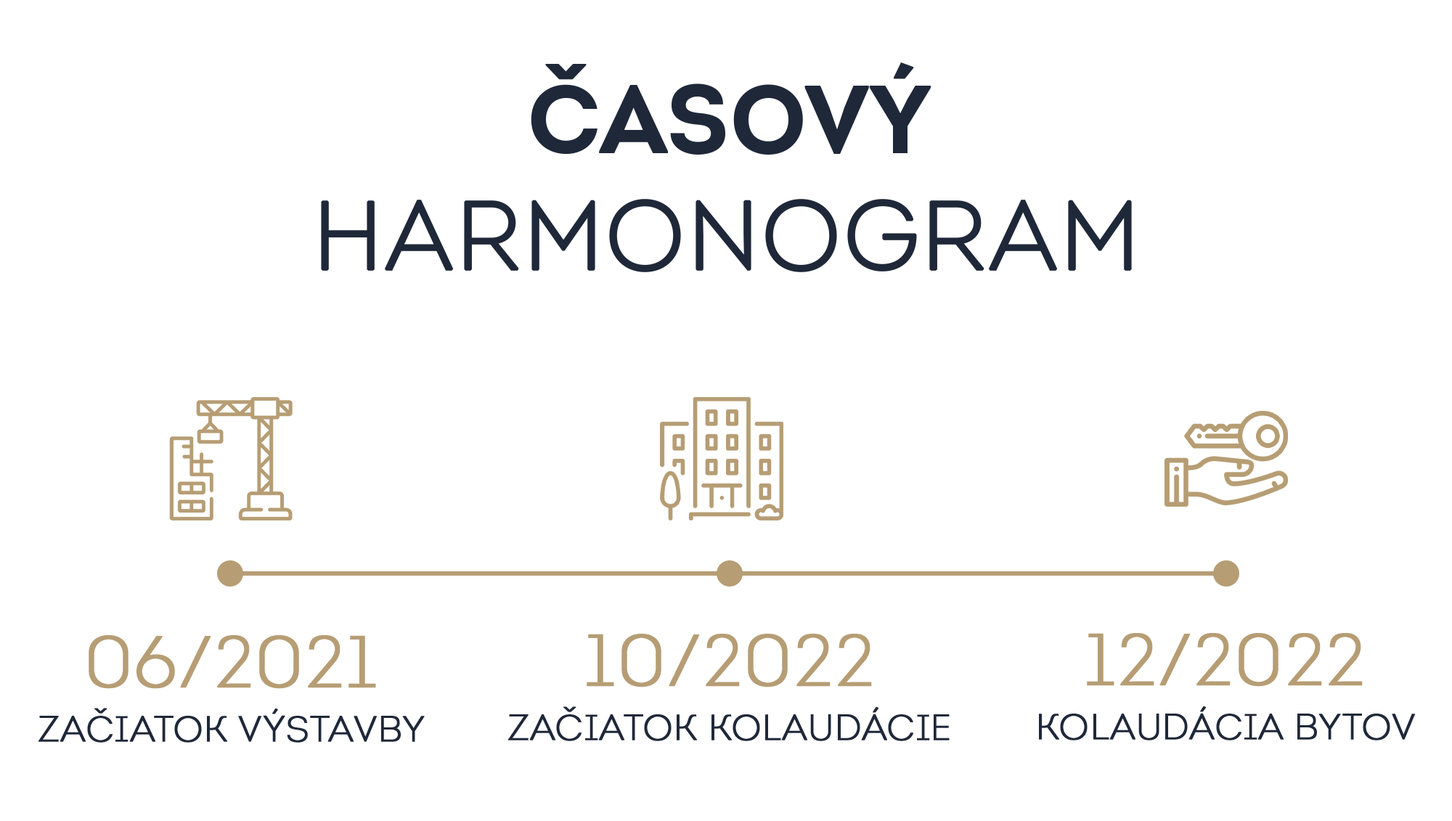
<style>
.page{position:relative;width:1452px;height:821px;background:#ffffff}
.page>*{position:absolute;margin:0}
.t1{font:96.8px "Intro-Light-Alt";color:#1f2839;text-transform:uppercase;font-weight:bold}
.t2{font:96.8px "Intro-Bold";color:#1f2839;text-transform:uppercase}
.t3{font:36.3px/54.4px "Intro-Light-Alt";color:#1f2839;text-transform:uppercase;font-weight:bold}
.t4{font:72.6px/54.4px "Intro-Light-Alt";color:#b69d74;text-transform:uppercase;font-weight:bold}
</style>
<div class="page">
<p class="t1" style="left:321px;top:62px;width:811px;height:210px;text-align:center"><span class="t2">Časový<br></span>Harmonogram</p>
<p class="t3" style="left:38px;top:635px;width:387px;height:108px;text-align:center"><span class="t4">06/2021<br></span>Začiatok výstavby</p>
<p class="t3" style="left:508px;top:634px;width:442px;height:107px;text-align:center"><span class="t4">10/2022<br></span>Začiatok kolaudácie</p>
<p class="t3" style="left:1039px;top:633px;width:376px;height:108px;text-align:center"><span class="t4">12/2022<br></span>Kolaudácia bytov</p>
</div>
